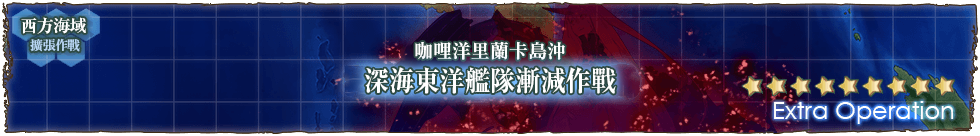
<style>
.page{position:relative;width:980px;height:136px}
.page>*{position:absolute;margin:0}
.t1{font:17px/22px "RyuminPr6N-ExBold";letter-spacing:-0.04em;color:#ffffff}
.t2{font:13px/22px "RyuminPr6N-ExBold";letter-spacing:-0.04em;color:#b9d7f5}
.t3{font:19px "RyuminPr6N-ExBold";color:#ffffff}
.t4{font:28px "RyuminPro-ExBold";color:#ffffff;scale:0.9 1}
</style>
<div class="page">
<p class="t1" style="left:21px;top:17px;width:65px;height:35px">西方海域<br>　  <span class="t2">擴張作戰</span></p>
<p class="t3" style="left:415px;top:41px;width:150px;height:19px">咖哩洋里蘭卡島沖</p>
<p class="t4" style="left:365px;top:67px;width:251px;height:27px">深海東洋艦隊漸減作戰</p>
</div>
